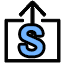
<style>
.page{position:relative;width:64px;height:64px;background:#ffffff}
.page>*{position:absolute;margin:0}
.t1{font:42px "MS-PGothic";color:#71b4ff;font-weight:bold}
</style>
<div class="page">
<p class="t1" style="left:20px;top:26px;width:23px;height:30px">S</p>
</div>
